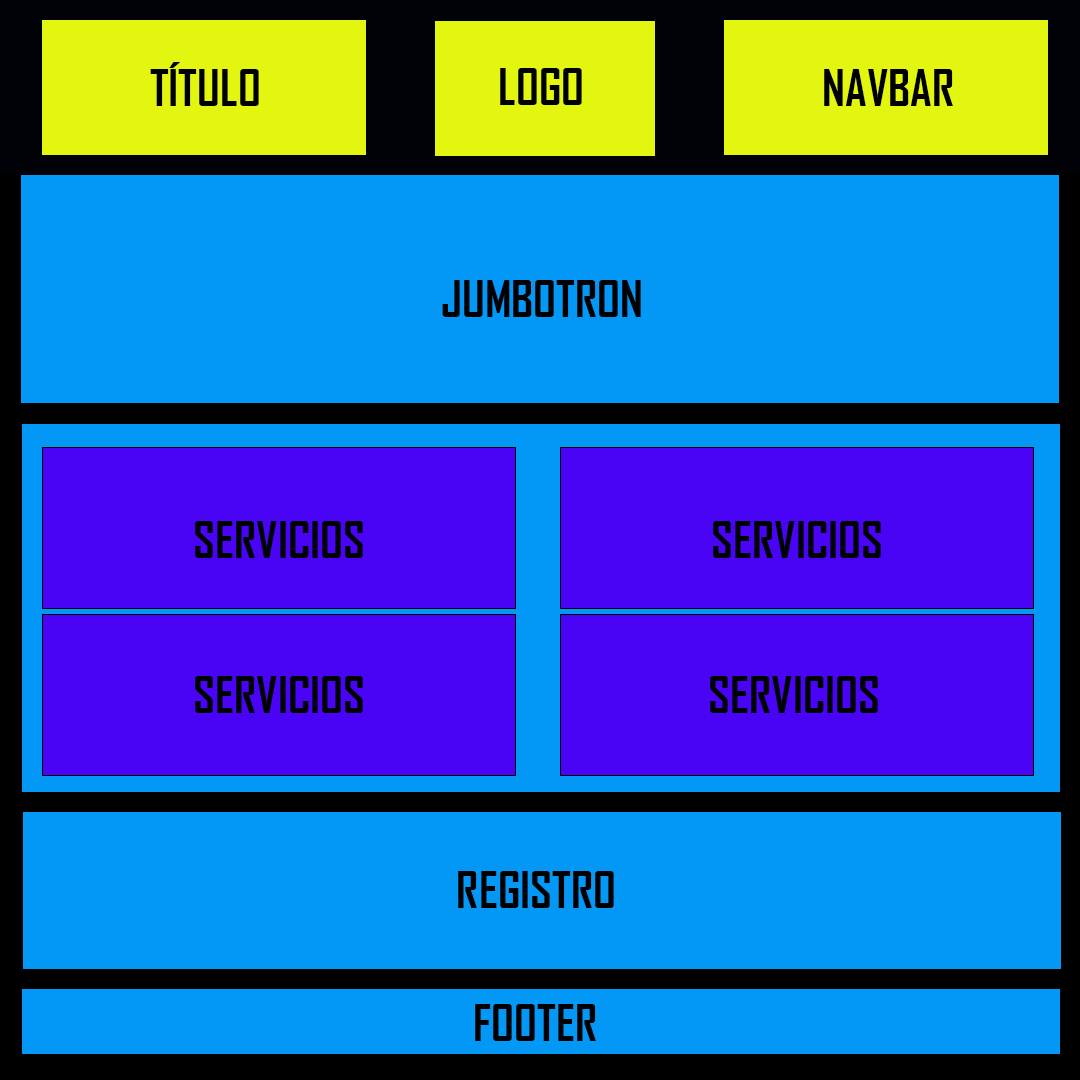
<style>
.page{position:relative;width:1080px;height:1080px;background:#0498f6}
.page>*{position:absolute;margin:0}
.t1{font:48px "AgencyFB-Bold";color:#000000}
</style>
<div class="page">
<p class="t1" style="left:150px;top:62px;width:109px;height:44px">TÍTULO</p>
<p class="t1" style="left:500px;top:68px;width:82px;height:37px">LOGO</p>
<p class="t1" style="left:824px;top:69px;width:129px;height:37px">NAVBAR</p>
<p class="t1" style="left:442px;top:280px;width:199px;height:37px">JUMBOTRON</p>
<p class="t1" style="left:195px;top:521px;width:168px;height:37px">SERVICIOS</p>
<p class="t1" style="left:713px;top:521px;width:168px;height:37px">SERVICIOS</p>
<p class="t1" style="left:195px;top:676px;width:168px;height:37px">SERVICIOS</p>
<p class="t1" style="left:710px;top:676px;width:168px;height:37px">SERVICIOS</p>
<p class="t1" style="left:458px;top:871px;width:156px;height:37px">REGISTRO</p>
<p class="t1" style="left:475px;top:1004px;width:121px;height:37px">FOOTER</p>
</div>
